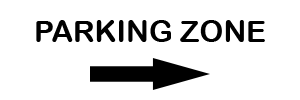
<style>
.page{position:relative;width:300px;height:100px;background:#ffffff}
.page>*{position:absolute;margin:0}
.t1{font:30px "ArialRoundedMTBold";color:#000000}
</style>
<div class="page">
<p class="t1" style="left:36px;top:20px;width:229px;height:22px">PARKING ZONE</p>
</div>
